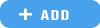
<style>
.page{position:relative;width:100px;height:28px;background:#47a1eb}
.page>*{position:absolute;margin:0}
.t1{font:32.7px "BebasNeue-Regular";letter-spacing:0.06em;color:#ffffff;text-transform:uppercase;scale:1.15 1}
.t2{font:14.3px "BebasNeue-Regular";letter-spacing:0.06em;color:#ffffff;text-transform:uppercase;scale:1.51 1}
</style>
<div class="page">
<p class="t1" style="left:19px;top:8px;width:13px;height:12px">+</p>
<p class="t2" style="left:40px;top:10px;width:29px;height:10px">add</p>
</div>
